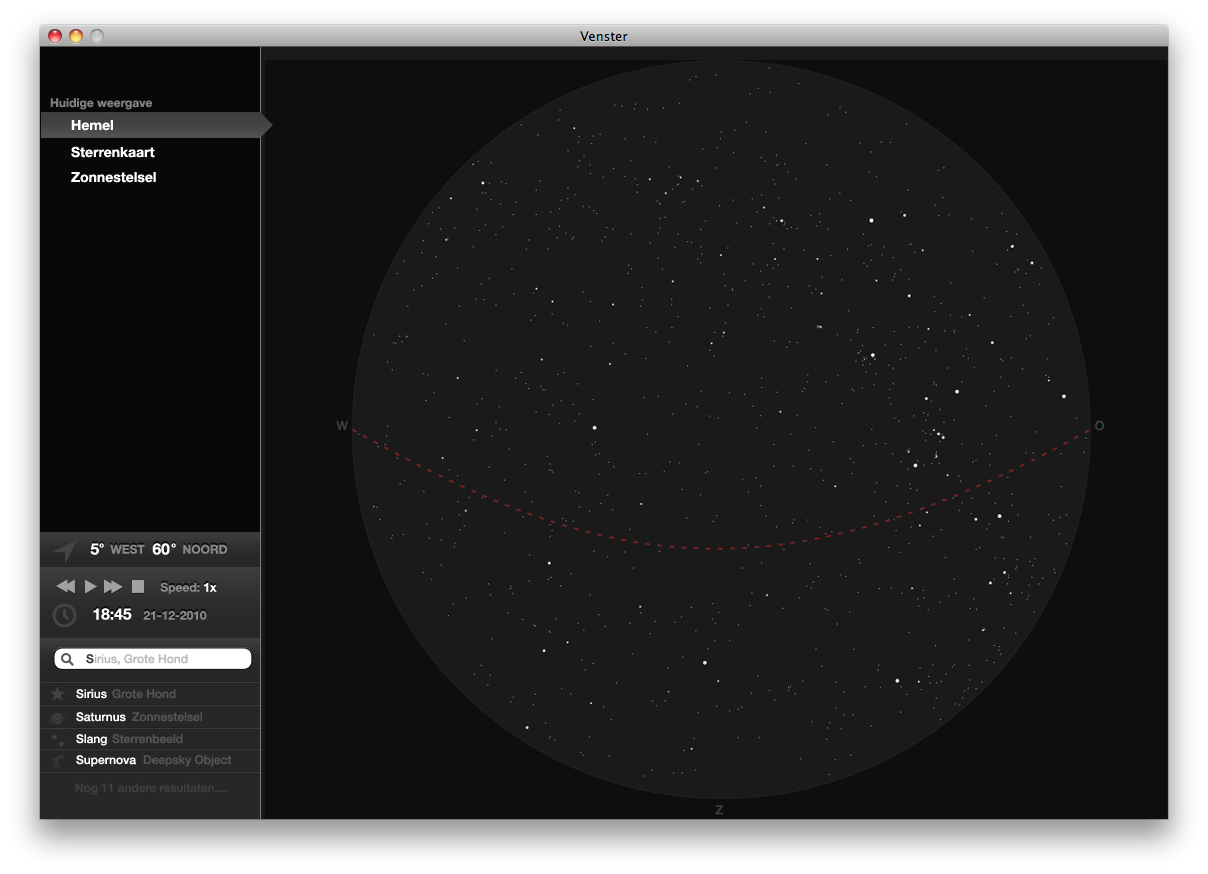
<style>
.page{position:relative;width:1208px;height:874px;background:#1a1a1a}
.page>*{position:absolute;margin:0}
.t1{font:12px "HelveticaNeue-Bold";color:#808080}
.t2{font:14px "HelveticaNeue-Bold";color:#ffffff}
.t3{font:15.6px "HelveticaNeue-Bold";color:#ffffff}
.t4{font:7.3px "HelveticaNeue-Bold";color:#ffffff}
.t5{font:12px "HelveticaNeue-Bold";color:#888888}
.t6{font:12px "HelveticaNeue-Bold";color:#ffffff}
.t7{font:12px "HelveticaNeue-Medium";color:#3b3b3b}
.t8{font:12px "HelveticaNeue-Medium";color:#bababa}
.t9{font:12px "HelveticaNeue-Medium";color:#ffffff}
.t10{font:12px "HelveticaNeue-Medium";color:#555555}
.t11{font:12px "HelveticaNeue-Medium";color:#3f3f3f}
</style>
<div class="page">
<p class="t1" style="left:50px;top:98px;width:102px;height:12px">Huidige weergave</p>
<p class="t2" style="left:71px;top:120px;width:42px;height:11px">Hemel</p>
<p class="t2" style="left:71px;top:146px;width:84px;height:12px">Sterrenkaart</p>
<p class="t2" style="left:71px;top:172px;width:85px;height:11px">Zonnestelsel</p>
<p class="t3" style="left:90px;top:543px;width:9px;height:12px">5</p>
<p class="t4" style="left:99px;top:543px;width:5px;height:5px">o</p>
<p class="t5" style="left:110px;top:544px;width:35px;height:10px">WEST</p>
<p class="t3" style="left:152px;top:543px;width:18px;height:12px">60</p>
<p class="t4" style="left:171px;top:543px;width:5px;height:5px">o</p>
<p class="t5" style="left:183px;top:544px;width:45px;height:10px">NOORD</p>
<p class="t5" style="left:160px;top:582px;width:57px;height:12px">Speed: <span class="t6">1x</span></p>
<p class="t3" style="left:93px;top:608px;width:39px;height:12px">18:45</p>
<p class="t5" style="left:143px;top:610px;width:64px;height:10px">21-12-2010</p>
<p class="t7" style="left:86px;top:654px;width:8px;height:10px">S</p>
<p class="t8" style="left:94px;top:654px;width:94px;height:11px">irius, Grote Hond</p>
<p class="t9" style="left:76px;top:689px;width:31px;height:10px">Sirius</p>
<p class="t10" style="left:112px;top:689px;width:64px;height:10px">Grote Hond</p>
<p class="t9" style="left:76px;top:712px;width:50px;height:10px">Saturnus</p>
<p class="t10" style="left:132px;top:712px;width:70px;height:10px">Zonnestelsel</p>
<p class="t9" style="left:76px;top:734px;width:31px;height:12px">Slang</p>
<p class="t10" style="left:112px;top:734px;width:71px;height:10px">Sterrenbeeld</p>
<p class="t9" style="left:76px;top:755px;width:60px;height:12px">Supernova</p>
<p class="t10" style="left:143px;top:755px;width:89px;height:12px">Deepsky Object</p>
<p class="t11" style="left:75px;top:783px;width:152px;height:12px">Nog 11 andere resultaten....</p>
</div>
